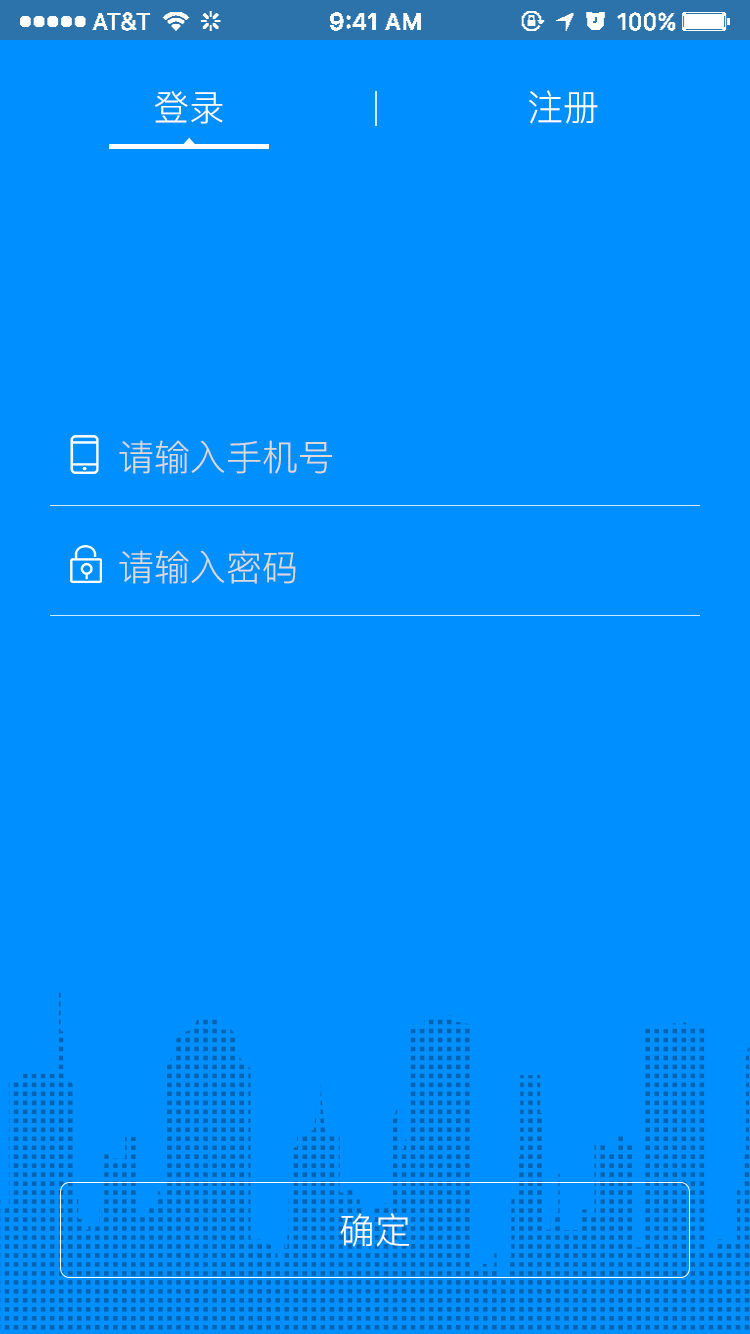
<style>
.page{position:relative;width:750px;height:1334px;background:#008fff}
.page>*{position:absolute;margin:0}
.t1{font:36px "PingFang-SC-Regular";color:#ffffff}
.t2{font:36px "PingFang-SC-Regular";color:#d9d9d9}
</style>
<div class="page">
<p class="t1" style="left:154px;top:91px;width:69px;height:33px">登录</p>
<p class="t1" style="left:529px;top:90px;width:69px;height:34px">注册</p>
<p class="t2" style="left:119px;top:440px;width:213px;height:34px">请输入手机号</p>
<p class="t2" style="left:119px;top:550px;width:177px;height:34px">请输入密码</p>
<p class="t1" style="left:340px;top:1213px;width:69px;height:34px">确定</p>
</div>
